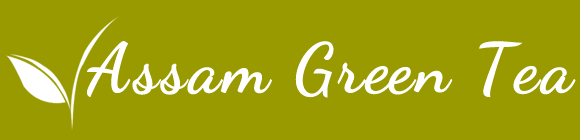
<style>
.page{position:relative;width:580px;height:140px;background:#999900}
.page>*{position:absolute;margin:0}
.t1{font:69px "DancingScript-Bold";letter-spacing:0.05em;color:#ffffff}
</style>
<div class="page">
<p class="t1" style="left:87px;top:41px;width:489px;height:57px">Assam Green Tea</p>
</div>
